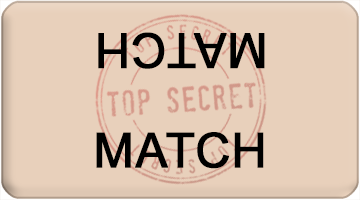
<style>
.page{position:relative;width:360px;height:200px;background:#e8d0bb}
.page>*{position:absolute;margin:0}
.t1{font:48px "ArialMT";color:#000000;font-weight:bold}
</style>
<div class="page">
<p class="t1" style="left:98px;top:32px;width:167px;height:37px;rotate:180deg">MATCH</p>
<p class="t1" style="left:96px;top:132px;width:168px;height:37px">MATCH</p>
</div>
